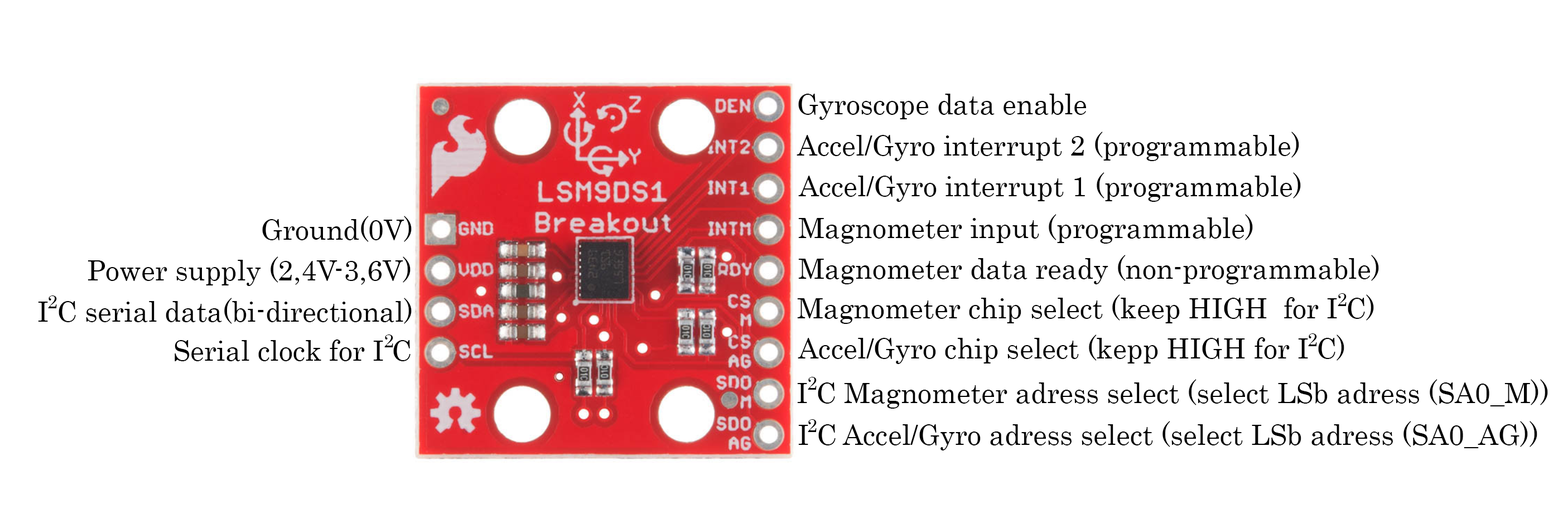
<style>
.page{position:relative;width:1568px;height:514px;background:#ffffff}
.page>*{position:absolute;margin:0}
.t1{font:27.9px "Century";color:#000000}
.t2{font:18.6px "Century";color:#000000}
</style>
<div class="page">
<p class="t1" style="left:798px;top:94px;width:288px;height:26px">Gyroscope data enable</p>
<p class="t1" style="left:797px;top:132px;width:502px;height:29px">Accel/Gyro interrupt 2 (programmable)</p>
<p class="t1" style="left:798px;top:172px;width:503px;height:30px">Accel/Gyro interrupt 1 (programmable)</p>
<p class="t1" style="left:262px;top:216px;width:150px;height:26px">Ground(0V)</p>
<p class="t1" style="left:798px;top:214px;width:455px;height:30px">Magnometer input (programmable)</p>
<p class="t1" style="left:88px;top:257px;width:323px;height:29px">Power supply (2,4V-3,6V)</p>
<p class="t1" style="left:798px;top:255px;width:581px;height:29px">Magnometer data ready (non-programmable)</p>
<p class="t2" style="left:1338px;top:293px;width:9px;height:13px">2</p>
<p class="t1" style="left:38px;top:298px;width:374px;height:26px">I C serial data(bi-directional)</p>
<p class="t2" style="left:48px;top:296px;width:9px;height:12px">2</p>
<p class="t1" style="left:797px;top:295px;width:577px;height:29px">Magnometer chip select (keep HIGH  for I C)</p>
<p class="t1" style="left:175px;top:340px;width:236px;height:21px">Serial clock for I C</p>
<p class="t2" style="left:384px;top:335px;width:9px;height:13px">2</p>
<p class="t1" style="left:798px;top:335px;width:546px;height:29px">Accel/Gyro chip select (kepp HIGH for I C)</p>
<p class="t2" style="left:1308px;top:334px;width:9px;height:12px">2</p>
<p class="t2" style="left:808px;top:377px;width:9px;height:13px">2</p>
<p class="t1" style="left:797px;top:379px;width:751px;height:30px">I C Magnometer adress select (select LSb adress (SA0_M))</p>
<p class="t1" style="left:798px;top:421px;width:739px;height:30px">I C Accel/Gyro adress select (select LSb adress (SA0_AG))</p>
<p class="t2" style="left:808px;top:419px;width:9px;height:13px">2</p>
</div>
